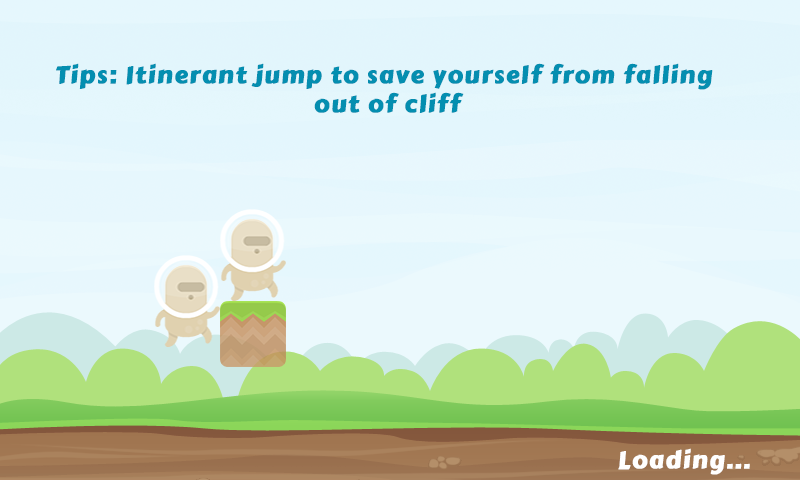
<style>
.page{position:relative;width:800px;height:480px}
.page>*{position:absolute;margin:0}
.t1{font:24px "CarterOne";letter-spacing:0.05em;color:#048eb0;font-weight:bold}
.t2{font:24px "CarterOne";letter-spacing:0.05em;color:#ffffff;font-weight:bold}
</style>
<div class="page">
<p class="t1" style="left:56px;top:63px;width:657px;height:50px;text-align:center">Tips: Itinerant jump to save yourself from falling <br>out of cliff</p>
<p class="t2" style="left:618px;top:448px;width:132px;height:27px">Loading...</p>
</div>
